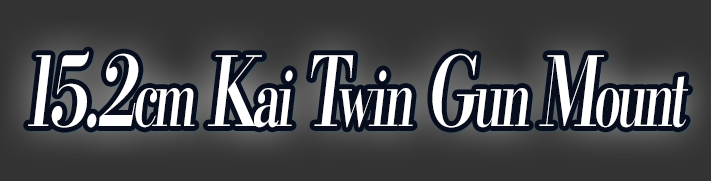
<style>
.page{position:relative;width:711px;height:181px;background:#333333}
.page>*{position:absolute;margin:0}
.t1{font:96px "KochoStd-Heavy";letter-spacing:-0.08em;color:#ffffff;font-style:italic;scale:0.65 1}
.t2{font:76.8px "KochoStd-Heavy";letter-spacing:-0.08em;color:#ffffff;font-style:italic;scale:0.65 1}
</style>
<div class="page">
<p class="t1" style="left:28px;top:51px;width:661px;height:77px">15.2<span class="t2">cm</span> K<span class="t2">ai</span> T<span class="t2">win</span> G<span class="t2">un </span>M<span class="t2">ount</span></p>
</div>
